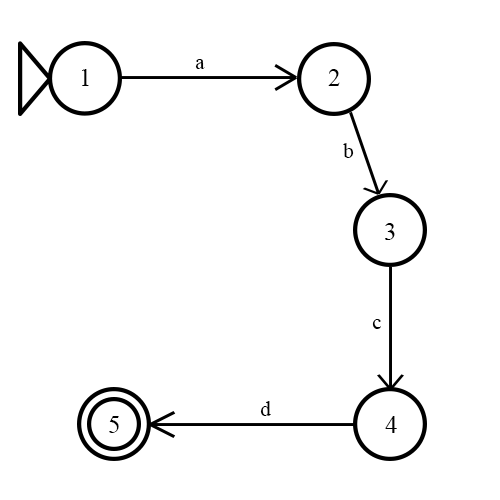
<style>
.page{position:relative;width:500px;height:500px;background:#ffffff}
.page>*{position:absolute;margin:0}
.t1{font:21.2px "TimesNewRomanPSMT";color:#000000}
.t2{font:25.4px "TimesNewRomanPSMT";color:#000000}
</style>
<div class="page">
<p class="t1" style="left:195px;top:59px;width:10px;height:10px">a</p>
<p class="t2" style="left:82px;top:69px;width:7px;height:17px">1</p>
<p class="t2" style="left:328px;top:69px;width:12px;height:17px">2</p>
<p class="t1" style="left:343px;top:143px;width:11px;height:15px">b</p>
<p class="t2" style="left:385px;top:223px;width:10px;height:17px">3</p>
<p class="t1" style="left:372px;top:319px;width:9px;height:10px">c</p>
<p class="t1" style="left:260px;top:401px;width:11px;height:15px">d</p>
<p class="t2" style="left:109px;top:416px;width:10px;height:17px">5</p>
<p class="t2" style="left:385px;top:416px;width:12px;height:17px">4</p>
</div>
